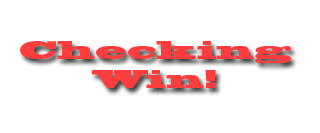
<style>
.page{position:relative;width:320px;height:133px;background:#ffffff}
.page>*{position:absolute;margin:0}
.t1{font:24px "BlackoakStd";color:#ff3d3d}
</style>
<div class="page">
<p class="t1" style="left:20px;top:41px;width:271px;height:47px;text-align:center">Checking<br>Win!</p>
</div>
